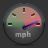
<style>
.page{position:relative;width:48px;height:48px;background:#333333}
.page>*{position:absolute;margin:0}
.t1{font:7px "LucidaGrande-Bold";color:#949494}
</style>
<div class="page">
<p class="t1" style="left:15px;top:31px;width:16px;height:8px">mph</p>
</div>
